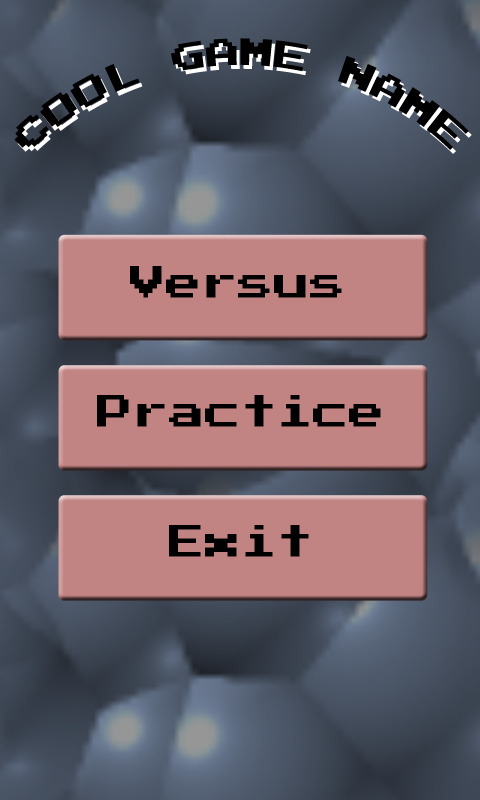
<style>
.page{position:relative;width:480px;height:800px;background:#c28383}
.page>*{position:absolute;margin:0}
.t1{font:30px "PressStart2P";color:#000000}
.t2{font:36px "PressStart2P";color:#000000}
</style>
<div class="page">
<p class="t1" style="left:14px;top:38px;width:455px;height:112px;text-align:center">COOL GAME NAME</p>
<p class="t2" style="left:130px;top:266px;width:212px;height:32px">Versus</p>
<p class="t2" style="left:97px;top:395px;width:284px;height:32px">Practice</p>
<p class="t2" style="left:169px;top:525px;width:140px;height:32px">Exit</p>
</div>
